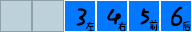
<style>
.page{position:relative;width:192px;height:32px;background:#0078ff}
.page>*{position:absolute;margin:0}
.t1{font:36px "FZMWJW--GB1-0";letter-spacing:-0.1em;color:#000000}
.t2{font:12px "FZMWJW--GB1-0";letter-spacing:-0.1em;color:#000000}
</style>
<div class="page">
<p class="t1" style="left:171px;top:6px;width:12px;height:20px">6</p>
<p class="t1" style="left:76px;top:8px;width:11px;height:18px">3</p>
<p class="t1" style="left:107px;top:8px;width:14px;height:17px">4</p>
<p class="t1" style="left:140px;top:8px;width:10px;height:17px">5</p>
<p class="t2" style="left:86px;top:21px;width:8px;height:11px">左</p>
<p class="t2" style="left:118px;top:21px;width:8px;height:11px">右</p>
<p class="t2" style="left:149px;top:19px;width:9px;height:12px">前</p>
<p class="t2" style="left:183px;top:21px;width:8px;height:11px">后</p>
</div>
